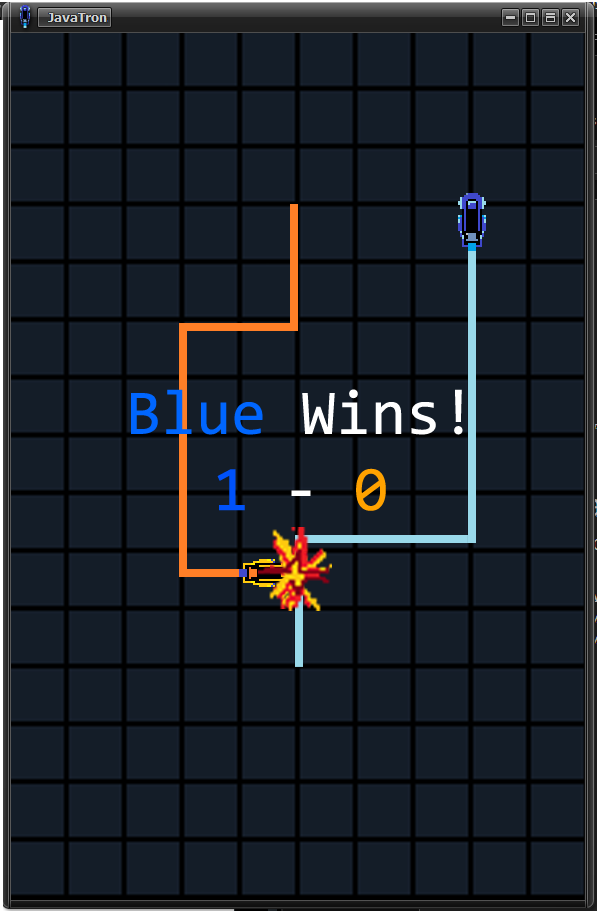
<style>
.page{position:relative;width:600px;height:919px;background:#141d28}
.page>*{position:absolute;margin:0}
.t1{font:63.6px "Consolas";color:#ffffff}
.t2{font:63.6px "Consolas";color:#0066ff}
.t3{font:63.6px "Consolas";color:#0052fa}
.t4{font:63.6px "Consolas";color:#ffa200}
</style>
<div class="page">
<p class="t1" style="left:131px;top:389px;width:332px;height:122px;text-align:center"><span class="t2">Blue</span> Wins!<br><span class="t3">1</span> - <span class="t4">0</span></p>
</div>
